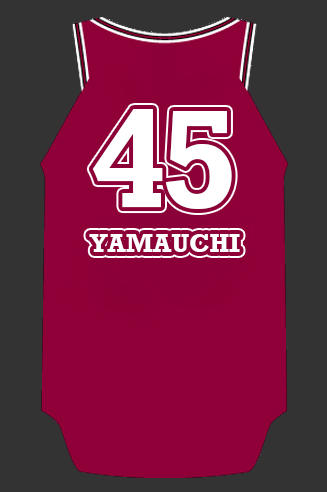
<style>
.page{position:relative;width:327px;height:492px;background:#333333}
.page>*{position:absolute;margin:0}
.t1{font:141.3px "Rockwell-Bold";letter-spacing:-0.05em;color:#ffffff}
.t2{font:26.1px "Rockwell-Bold";color:#ffffff}
</style>
<div class="page">
<p class="t1" style="left:92px;top:109px;width:140px;height:100px">45</p>
<p class="t2" style="left:89px;top:234px;width:151px;height:18px">YAMAUCHI</p>
</div>
